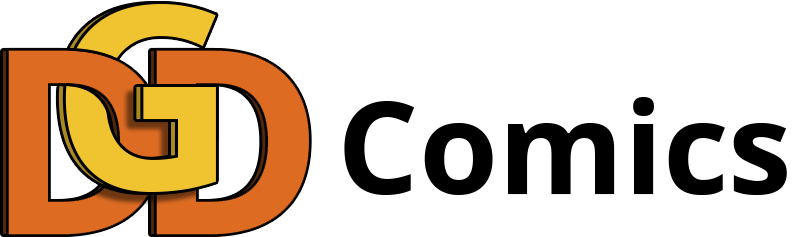
<style>
.page{position:relative;width:792px;height:237px;background:#ffffff}
.page>*{position:absolute;margin:0}
.t1{font:128px "OpenSans-Bold";color:#000000}
</style>
<div class="page">
<p class="t1" style="left:344px;top:97px;width:443px;height:98px">Comics</p>
</div>
